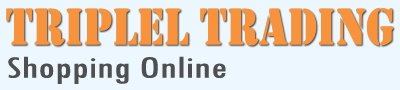
<style>
.page{position:relative;width:400px;height:90px;background:#ecf7ff}
.page>*{position:absolute;margin:0}
.t1{font:54px "Stencil";color:#f8933b;scale:0.85 1}
.t2{font:32.4px "TwCenMT-Condensed";color:#4f4f4f;scale:1.42 1}
</style>
<div class="page">
<p class="t1" style="left:6px;top:7px;width:388px;height:39px">TRIPLEL TRADING</p>
<p class="t2" style="left:8px;top:56px;width:218px;height:28px">Shopping Online</p>
</div>
